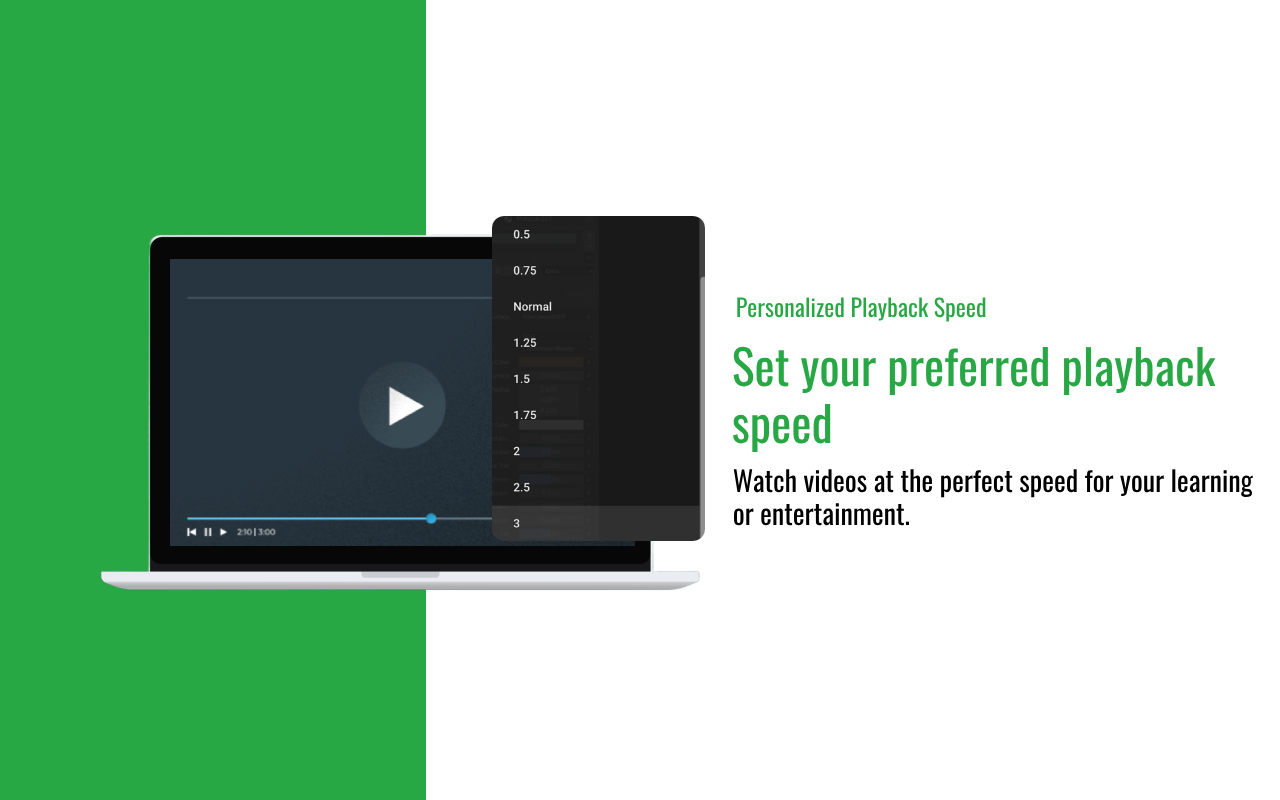
<style>
.page{position:relative;width:1280px;height:800px;background:#ffffff}
.page>*{position:absolute;margin:0}
.t1{font:24px "Oswald-Regular";color:#28a745}
.t2{font:48px "Oswald-Regular";color:#28a745}
.t3{font:28px "Oswald-Regular";color:#000000}
</style>
<div class="page">
<p class="t1" style="left:737px;top:297px;width:249px;height:25px">Personalized Playback Speed</p>
<p class="t2" style="left:732px;top:346px;width:484px;height:107px">Set your preferred playback <br>speed</p>
<p class="t3" style="left:733px;top:469px;width:521px;height:57px">Watch videos at the perfect speed for your learning <br>or entertainment.</p>
</div>
